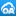
<style>
.page{position:relative;width:16px;height:16px}
.page>*{position:absolute;margin:0}
.t1{font:7.4px "Jpangtouyu";letter-spacing:-0.03em;color:#ffffff;font-weight:bold}
</style>
<div class="page">
<p class="t1" style="left:2px;top:7px;width:13px;height:7px">OA</p>
</div>
